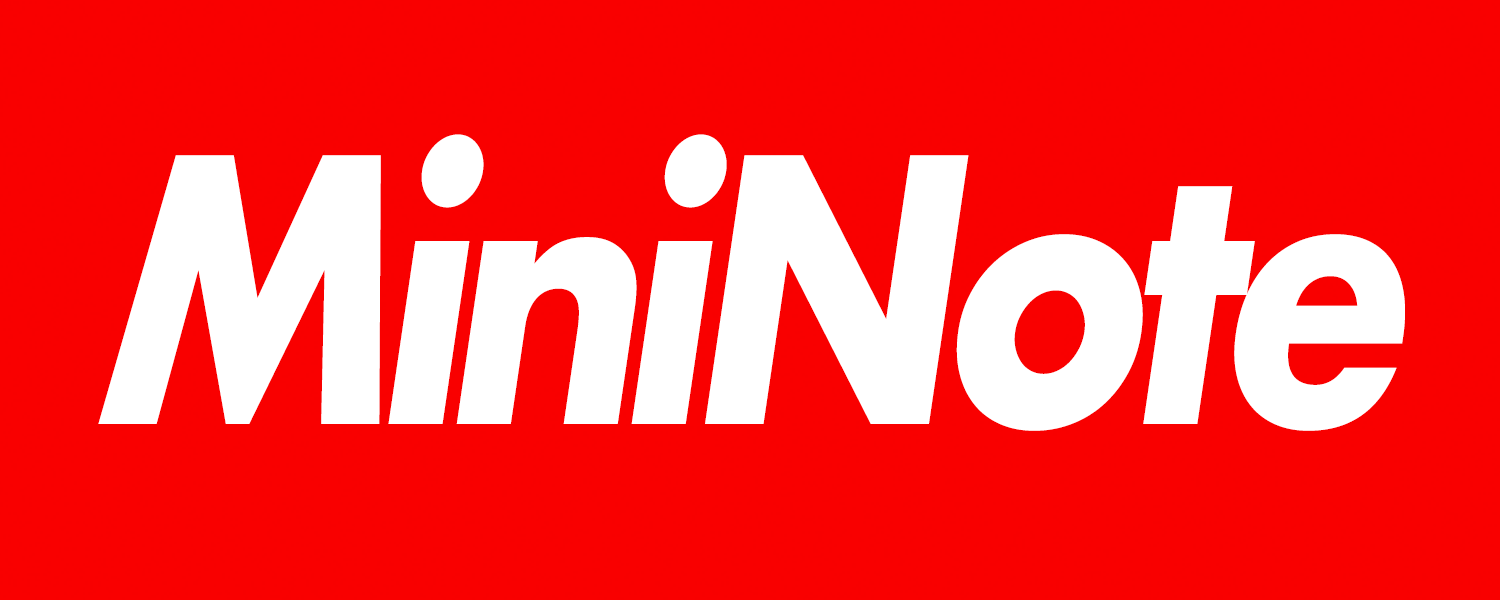
<style>
.page{position:relative;width:1500px;height:600px;background:#f90000}
.page>*{position:absolute;margin:0}
.t1{font:356.3px "Futura-Bold";letter-spacing:-0.075em;color:#ffffff;font-style:italic;scale:0.83 1}
</style>
<div class="page">
<p class="t1" style="left:98px;top:134px;width:1307px;height:297px">MiniNote</p>
</div>
